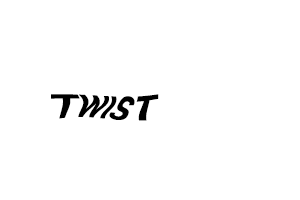
<style>
.page{position:relative;width:300px;height:200px;background:#ffffff}
.page>*{position:absolute;margin:0}
.t1{font:36px "Roboto-Bold";color:#000000}
</style>
<div class="page">
<p class="t1" style="left:51px;top:94px;width:108px;height:27px">TWIST</p>
</div>
